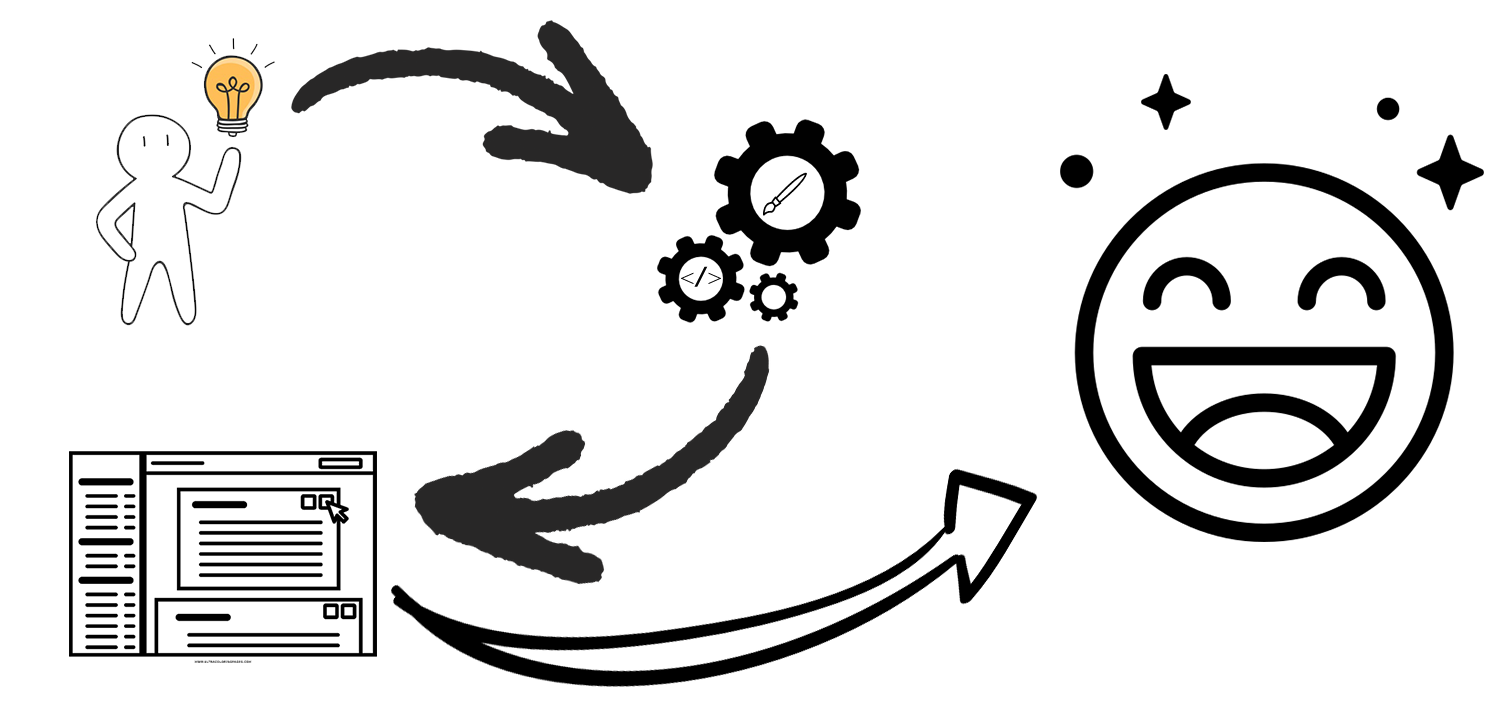
<style>
.page{position:relative;width:1509px;height:720px;background:#ffffff}
.page>*{position:absolute;margin:0}
.t1{font:24px "EngraversMT";color:#050505}
</style>
<div class="page">
<p class="t1" style="left:681px;top:266px;width:40px;height:21px">&lt;/&gt;</p>
</div>
